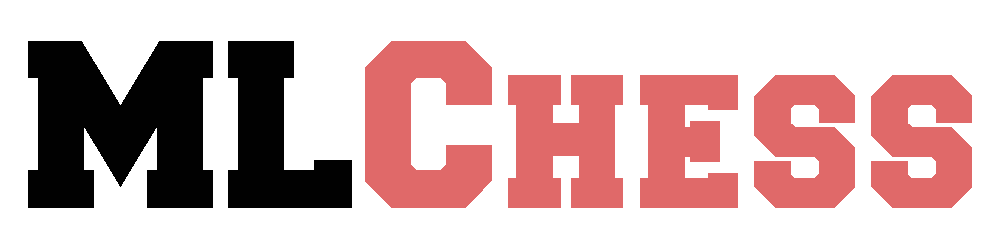
<style>
.page{position:relative;width:1000px;height:246px;background:#ffffff}
.page>*{position:absolute;margin:0}
.t1{font:200px "CollegiateBlackFLF";letter-spacing:0.02em;color:#e06969}
.t2{font:200px "CollegiateBlackFLF";letter-spacing:0.02em;color:#010101}
</style>
<div class="page">
<p class="t1" style="left:28px;top:41px;width:944px;height:167px"><span class="t2">ML</span>Chess</p>
</div>
